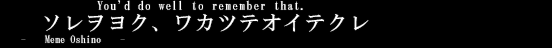
<style>
.page{position:relative;width:552px;height:48px;background:#000000}
.page>*{position:absolute;margin:0}
.t1{font:12px/13px "HGMinchoB";letter-spacing:0.075em;color:#ffffff}
.t2{font:20px/7px "HGMinchoB";letter-spacing:0.1em;color:#ffffff}
.t3{font:10px "HGMinchoB";letter-spacing:0.01em;color:#ffffff}
</style>
<div class="page">
<p class="t1" style="left:44px;top:0px;width:325px;height:32px;text-align:center">You’d do well to remember that. <br><br><span class="t2">ソレヲヨク、ワカツテオイテクレ</span></p>
<p class="t3" style="left:45px;top:35px;width:56px;height:8px">Meme Oshino</p>
</div>
